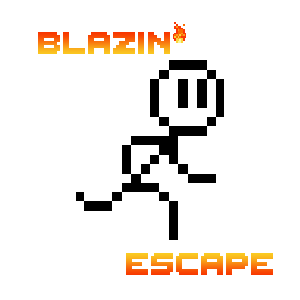
<style>
.page{position:relative;width:300px;height:300px;background:#ffffff}
.page>*{position:absolute;margin:0}
.t1{font:50px "ThaleahFat"}
</style>
<div class="page">
<p class="t1" style="left:38px;top:32px;width:132px;height:22px">BLAZIN</p>
<p class="t1" style="left:126px;top:253px;width:147px;height:22px">EScape</p>
</div>
